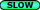
<style>
.page{position:relative;width:40px;height:10px}
.page>*{position:absolute;margin:0}
.t1{font:8px "Verdana-Bold";color:#0d0d0d}
</style>
<div class="page">
<p class="t1" style="left:7px;top:1px;width:27px;height:8px">SLOW</p>
</div>
